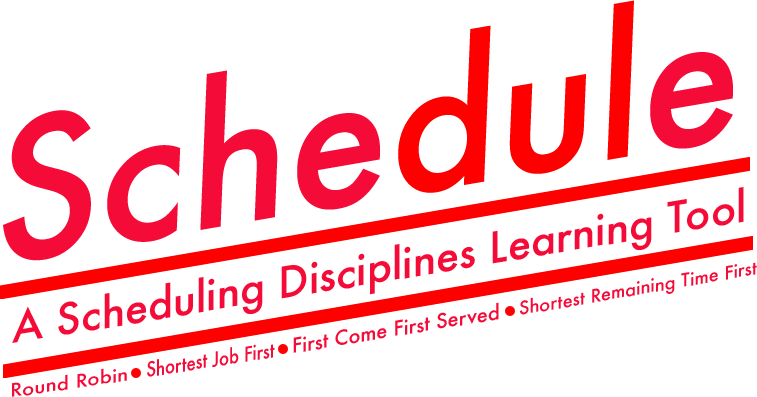
<style>
.page{position:relative;width:757px;height:397px;background:#ffffff}
.page>*{position:absolute;margin:0}
.t1{font:189.2px "Futura-Medium";color:#f40b38}
.t2{font:189.2px "Futura-Medium";color:#ff0000}
.t3{font:42px "Futura-Medium";color:#f40b38}
.t4{font:18px "Futura-Medium";color:#f40b38}
.t5{font:20px "Futura-Medium";color:#f40b38}
.t6{font:20px "Futura-Medium";color:#f40b38;scale:0.84 1}
.t7{font:18px "Futura-Medium";color:#f40b38;scale:1.15 1}
</style>
<div class="page">
<p class="t1" style="left:3px;top:0px;width:730px;height:261px;rotate:-10deg">Sche<span class="t2">dul</span>e</p>
<p class="t3" style="left:12px;top:187px;width:732px;height:156px;rotate:-9deg">A Scheduling Disciplines Learning Tool</p>
<p class="t4" style="left:519px;top:262px;width:238px;height:53px;rotate:-10deg">Shortest Remaining Time First</p>
<p class="t5" style="left:293px;top:302px;width:206px;height:51px;rotate:-9deg">First Come First Served</p>
<p class="t6" style="left:147px;top:344px;width:128px;height:33px;rotate:-9deg">Shortest Job First</p>
<p class="t7" style="left:12px;top:368px;width:115px;height:29px;rotate:-8deg">Round Robin</p>
</div>
